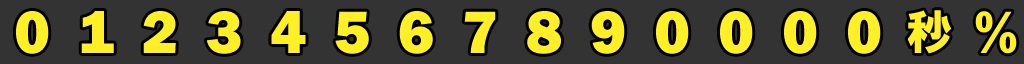
<style>
.page{position:relative;width:1024px;height:64px;background:#333333}
.page>*{position:absolute;margin:0}
.t1{font:62px "FranklinGothic-Heavy";letter-spacing:0.05em;color:#ffef26}
.t2{font:46.9px "HGSSoeiKakugothicUB";letter-spacing:0.05em;color:#ffef26}
</style>
<div class="page">
<p class="t1" style="left:16px;top:11px;width:33px;height:43px">0</p>
<p class="t1" style="left:81px;top:11px;width:33px;height:42px">1</p>
<p class="t1" style="left:143px;top:11px;width:33px;height:42px">2</p>
<p class="t1" style="left:206px;top:11px;width:35px;height:43px">3</p>
<p class="t1" style="left:271px;top:11px;width:35px;height:42px">4</p>
<p class="t1" style="left:335px;top:11px;width:34px;height:43px">5</p>
<p class="t1" style="left:399px;top:11px;width:34px;height:43px">6</p>
<p class="t1" style="left:464px;top:11px;width:32px;height:42px">7</p>
<p class="t1" style="left:527px;top:11px;width:34px;height:43px">8</p>
<p class="t1" style="left:591px;top:11px;width:34px;height:43px">9</p>
<p class="t1" style="left:656px;top:11px;width:33px;height:43px">0</p>
<p class="t1" style="left:720px;top:11px;width:33px;height:43px">0</p>
<p class="t1" style="left:784px;top:11px;width:33px;height:43px">0</p>
<p class="t1" style="left:848px;top:11px;width:33px;height:43px">0</p>
<p class="t2" style="left:907px;top:10px;width:45px;height:44px">秒</p>
<p class="t1" style="left:975px;top:11px;width:42px;height:43px">%</p>
</div>
